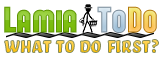
<style>
.page{position:relative;width:160px;height:60px;background:#ffffff}
.page>*{position:absolute;margin:0}
.t1{font:36px "FORQUE";font-weight:bold}
.t2{font:24px "Bello-SmCp";text-transform:uppercase}
</style>
<div class="page">
<p class="t1" style="left:4px;top:6px;width:73px;height:27px">Lamia</p>
<p class="t1" style="left:97px;top:6px;width:29px;height:27px">To</p>
<p class="t1" style="left:128px;top:6px;width:29px;height:27px">Do</p>
<p class="t2" style="left:4px;top:39px;width:155px;height:14px">what to do first?</p>
</div>
